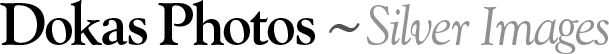
<style>
.page{position:relative;width:609px;height:54px;background:#ffffff}
.page>*{position:absolute;margin:0}
.t1{font:60px "Goudy-Bold";letter-spacing:-0.025em;color:#000000}
.t2{font:54px "Goudy-Italic";letter-spacing:-0.025em;color:#939393}
.t3{font:54px "Goudy-Italic";letter-spacing:-0.025em;color:#909090}
.t4{font:60px "Georgia";letter-spacing:-0.025em;color:#525252}
</style>
<div class="page">
<p class="t1" style="left:0px;top:3px;width:45px;height:42px">D</p>
<p class="t1" style="left:70px;top:0px;width:32px;height:45px">k</p>
<p class="t1" style="left:158px;top:3px;width:35px;height:42px">P</p>
<p class="t1" style="left:192px;top:0px;width:32px;height:45px">h</p>
<p class="t2" style="left:366px;top:5px;width:23px;height:40px">S</p>
<p class="t2" style="left:401px;top:4px;width:10px;height:41px">l</p>
<p class="t1" style="left:250px;top:11px;width:19px;height:34px">t</p>
<p class="t2" style="left:390px;top:9px;width:10px;height:36px">i</p>
<p class="t3" style="left:481px;top:7px;width:16px;height:38px">I</p>
<p class="t1" style="left:45px;top:18px;width:27px;height:27px">o</p>
<p class="t1" style="left:102px;top:18px;width:26px;height:27px">a</p>
<p class="t1" style="left:128px;top:18px;width:19px;height:27px">s</p>
<p class="t1" style="left:223px;top:18px;width:27px;height:27px">o</p>
<p class="t1" style="left:267px;top:18px;width:27px;height:27px">o</p>
<p class="t1" style="left:296px;top:18px;width:19px;height:27px">s</p>
<p class="t4" style="left:328px;top:23px;width:32px;height:10px">~</p>
<p class="t2" style="left:410px;top:20px;width:22px;height:25px">v</p>
<p class="t2" style="left:432px;top:20px;width:18px;height:25px">e</p>
<p class="t2" style="left:452px;top:21px;width:18px;height:24px">r</p>
<p class="t3" style="left:496px;top:21px;width:39px;height:25px">m</p>
<p class="t3" style="left:534px;top:19px;width:25px;height:26px">a</p>
<p class="t3" style="left:555px;top:19px;width:24px;height:35px">g</p>
<p class="t3" style="left:576px;top:20px;width:18px;height:25px">e</p>
<p class="t3" style="left:594px;top:20px;width:15px;height:25px">s</p>
</div>
